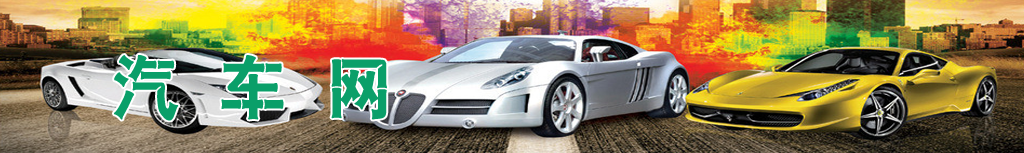
<style>
.page{position:relative;width:1024px;height:153px}
.page>*{position:absolute;margin:0}
.t1{font:70.3px "JZuJie";letter-spacing:0.57em;color:#0a9f69}
</style>
<div class="page">
<p class="t1" style="left:114px;top:55px;width:273px;height:66px">汽车网</p>
</div>
